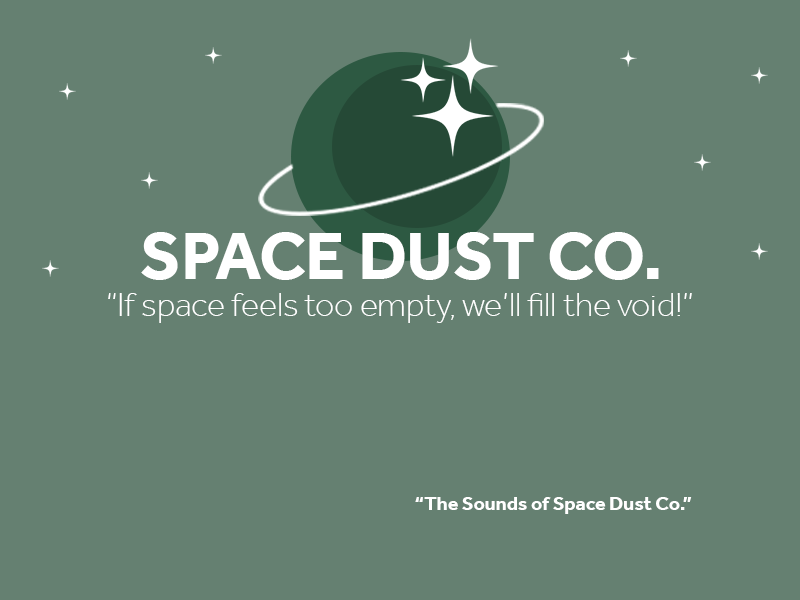
<style>
.page{position:relative;width:800px;height:600px;background:#658071}
.page>*{position:absolute;margin:0}
.t1{font:68.6px "Effra-Bold";color:#ffffff}
.t2{font:33.6px "Effra-Light";color:#ffffff}
.t3{font:19.7px "Effra-Bold";color:#ffffff}
</style>
<div class="page">
<p class="t1" style="left:141px;top:232px;width:518px;height:48px">SPACE DUST CO.</p>
<p class="t2" style="left:108px;top:293px;width:584px;height:30px">“If space feels too empty, we’ll fill the void!”</p>
<p class="t3" style="left:415px;top:497px;width:277px;height:17px">“The Sounds of Space Dust Co.”</p>
</div>
